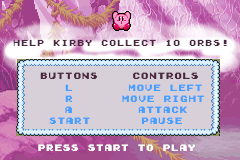
<style>
.page{position:relative;width:240px;height:160px;background:#d8d0d8}
.page>*{position:absolute;margin:0}
.t1{font:8px "GamegirlClassic";color:#4a2641}
.t2{font:8.3px "GamegirlClassic";color:#4a2641}
.t3{font:8.3px "GamegirlClassic";color:#469ffc}
.t4{font:8.3px "GamegirlClassic";color:#fefefe}
</style>
<div class="page">
<p class="t1" style="left:13px;top:39px;width:214px;height:7px">Help kirby collect 10 orbs!</p>
<p class="t2" style="left:40px;top:72px;width:57px;height:7px">BUTTONS</p>
<p class="t2" style="left:133px;top:72px;width:65px;height:7px">CONTROLS</p>
<p class="t3" style="left:65px;top:84px;width:7px;height:7px">L</p>
<p class="t3" style="left:128px;top:84px;width:74px;height:7px">MOVE LEFT</p>
<p class="t3" style="left:65px;top:95px;width:7px;height:7px">R</p>
<p class="t3" style="left:122px;top:95px;width:82px;height:7px">MOVE RIGHT</p>
<p class="t3" style="left:65px;top:106px;width:7px;height:7px">A</p>
<p class="t3" style="left:138px;top:106px;width:49px;height:7px">ATTACK</p>
<p class="t3" style="left:49px;top:117px;width:41px;height:7px">START</p>
<p class="t3" style="left:141px;top:117px;width:41px;height:7px">PAUSE</p>
<p class="t4" style="left:38px;top:144px;width:157px;height:7px">PRESS START TO PLAY</p>
</div>
